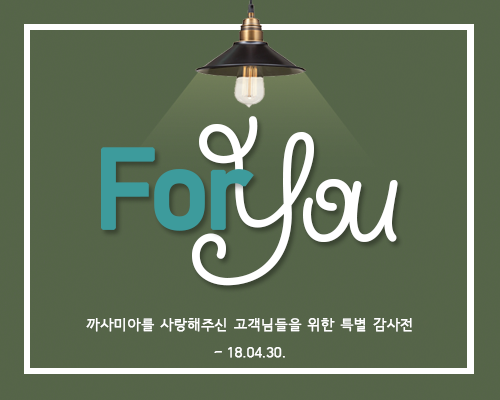
<style>
.page{position:relative;width:500px;height:400px;background:#566549}
.page>*{position:absolute;margin:0}
.t1{font:177.2px "GiddyupStd";letter-spacing:-0.08em;color:#ffffff}
.t2{font:111.5px "Bahnschrift";letter-spacing:-0.08em;color:#3d9b9c;font-weight:bold}
.t3{font:13.6px/28.2px "HCRDotum";color:#ffffff;font-weight:bold}
</style>
<div class="page">
<p class="t1" style="left:192px;top:116px;width:206px;height:170px">You</p>
<p class="t2" style="left:101px;top:147px;width:153px;height:84px">For</p>
<p class="t3" style="left:86px;top:318px;width:326px;height:40px;text-align:justify">까사미아를 사랑해주신 고객님들을 위한 특별 감사전<br>~ 18.04.30.</p>
</div>
